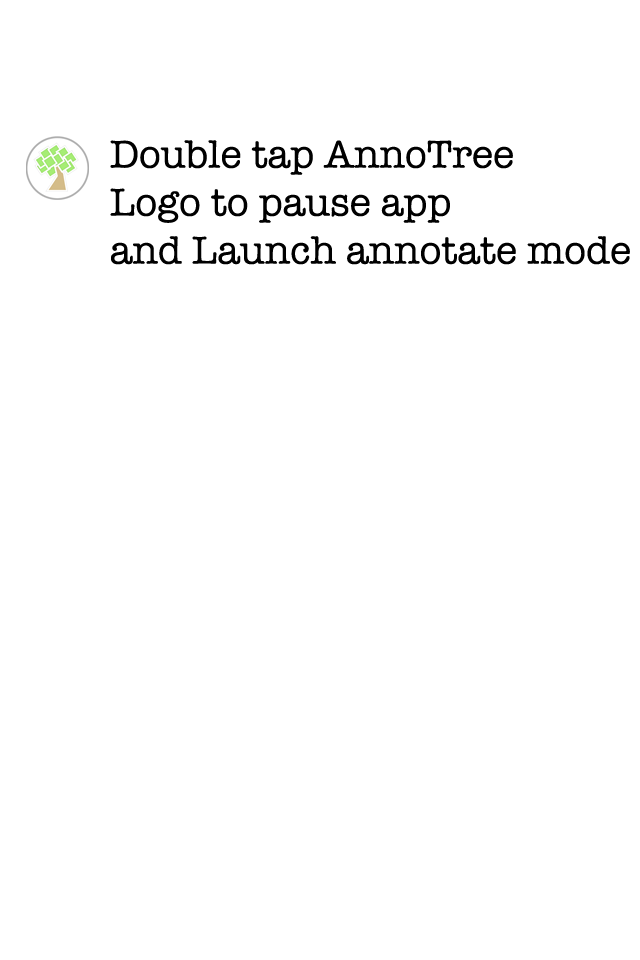
<style>
.page{position:relative;width:640px;height:960px;background:#ffffff}
.page>*{position:absolute;margin:0}
.t1{font:40px "AmericanTypewriter";color:#000000}
</style>
<div class="page">
<p class="t1" style="left:110px;top:140px;width:520px;height:125px">Double tap AnnoTree<br>Logo to pause app<br>and Launch annotate mode</p>
</div>
